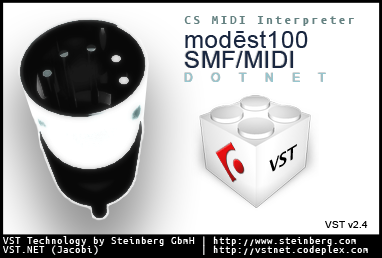
<style>
.page{position:relative;width:382px;height:258px;background:#ffffff}
.page>*{position:absolute;margin:0}
.t1{font:13px "UbuntuMono-Bold";letter-spacing:0.16em;color:#648181}
.t2{font:24px "ArialMT";letter-spacing:0.02em;color:#19263f}
.t3{font:12px "ArialMT";letter-spacing:1.54em;color:#95c7d0}
.t4{font:10px "ArialMT";color:#000000}
.t5{font:11px/9px "UbuntuMono-Regular";color:#ffffff}
</style>
<div class="page">
<p class="t1" style="left:184px;top:16px;width:170px;height:10px">CS MIDI Interpreter</p>
<p class="t2" style="left:185px;top:30px;width:123px;height:18px">modēst100</p>
<p class="t2" style="left:185px;top:51px;width:141px;height:31px">SMF/MIDI<br><span class="t3">DOTNET</span></p>
<p class="t4" style="left:325px;top:221px;width:43px;height:7px">VST v2.4</p>
<p class="t5" style="left:3px;top:236px;width:365px;height:19px">VST Technology by Steinberg GbmH | http://www.steinberg.com<br>VST.NET (Jacobi)                 | http://vstnet.codeplex.com</p>
</div>
